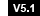
<style>
.page{position:relative;width:40px;height:16px;background:#000000}
.page>*{position:absolute;margin:0}
.t1{font:11px "Arial-BoldMT";color:#ffffff}
</style>
<div class="page">
<p class="t1" style="left:13px;top:4px;width:21px;height:8px">V5.1</p>
</div>
